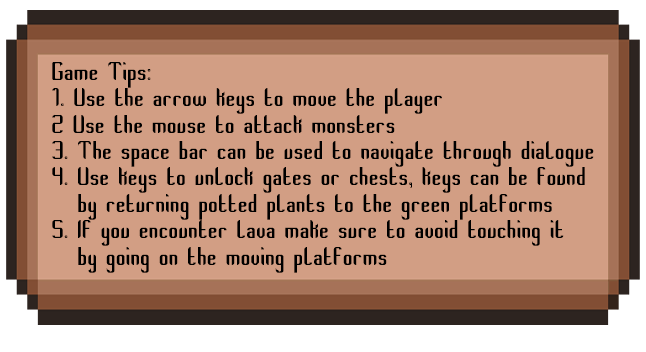
<style>
.page{position:relative;width:646px;height:352px;background:#d29e84}
.page>*{position:absolute;margin:0}
.t1{font:22px "ThempoNewSt";color:#000000}
</style>
<div class="page">
<p class="t1" style="left:52px;top:62px;width:542px;height:211px">Game Tips:<br>1. Use the arrow keys to move the player<br>2 Use the mouse to attack monsters<br>3. The space bar can be used to navigate through dialogue<br>4. Use keys to unlock gates or chests, keys can be found <br>   by returning potted plants to the green platforms <br>5. If you encounter lava make sure to avoid touching it <br>   by going on the moving platforms</p>
</div>
